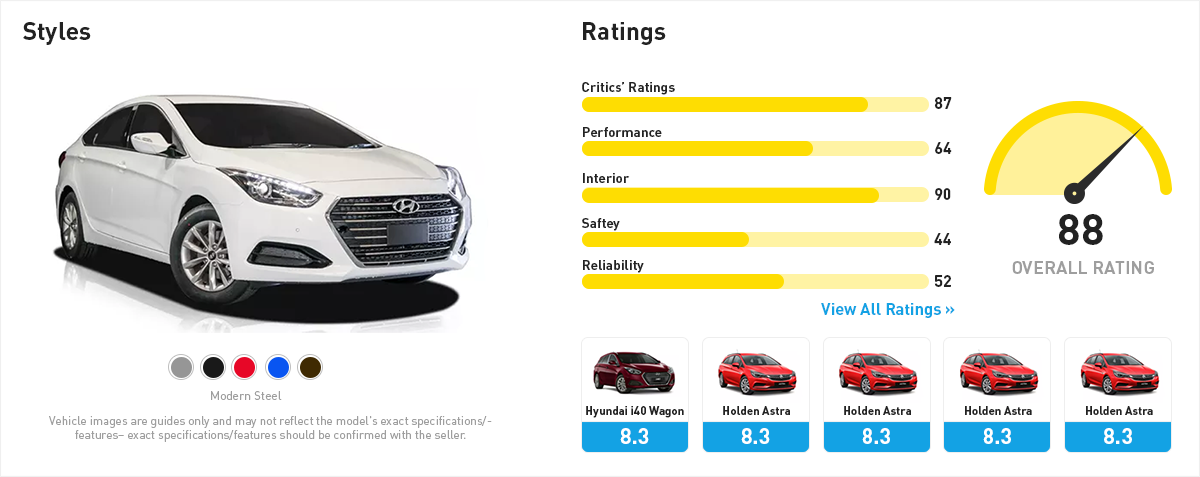
<style>
.page{position:relative;width:1200px;height:477px;background:#ffffff}
.page>*{position:absolute;margin:0}
.t1{font:24.8px "DIN-Bold";color:#222222}
.t2{font:13.6px "DIN-Bold";color:#222222}
.t3{font:16px "DIN-Bold";color:#222222}
.t4{font:16.1px "DIN-Bold";color:#222222}
.t5{font:13.7px "DIN-Bold";color:#222222}
.t6{font:43.2px "DIN-Bold";letter-spacing:0.005em;color:#222222}
.t7{font:17.9px "DIN-Bold";letter-spacing:0.005em;color:#9e9e9e}
.t8{font:16.3px "DIN-Bold";color:#13a2e4}
.t9{font:12px "DINPro-Regular";color:#9e9e9e}
.t10{font:11.6px "DIN-Bold";color:#222222}
.t11{font:11.8px "DINPro-Regular";color:#9e9e9e}
.t12{font:21.5px "DIN-Bold";color:#ffffff}
</style>
<div class="page">
<p class="t1" style="left:23px;top:22px;width:68px;height:23px">Styles</p>
<p class="t1" style="left:583px;top:22px;width:83px;height:23px">Ratings</p>
<p class="t2" style="left:582px;top:82px;width:93px;height:13px">Critics’ Ratings</p>
<p class="t3" style="left:934px;top:97px;width:18px;height:12px">87</p>
<p class="t2" style="left:583px;top:127px;width:79px;height:10px">Performance</p>
<p class="t4" style="left:935px;top:142px;width:17px;height:12px">64</p>
<p class="t5" style="left:583px;top:173px;width:47px;height:10px">Interior</p>
<p class="t4" style="left:935px;top:188px;width:16px;height:12px">90</p>
<p class="t2" style="left:582px;top:218px;width:38px;height:13px">Saftey</p>
<p class="t6" style="left:1059px;top:214px;width:44px;height:31px">88</p>
<p class="t4" style="left:934px;top:233px;width:17px;height:12px">44</p>
<p class="t5" style="left:583px;top:260px;width:61px;height:13px">Reliability</p>
<p class="t7" style="left:1012px;top:261px;width:142px;height:13px">OVERALL RATING</p>
<p class="t4" style="left:934px;top:275px;width:17px;height:12px">52</p>
<p class="t8" style="left:821px;top:303px;width:134px;height:15px">View All Ratings »</p>
<p class="t9" style="left:211px;top:391px;width:71px;height:9px">Modern Steel</p>
<p class="t10" style="left:586px;top:406px;width:98px;height:12px">Hyundai i40 Wagon</p>
<p class="t10" style="left:723px;top:406px;width:67px;height:9px">Holden Astra</p>
<p class="t10" style="left:844px;top:406px;width:67px;height:9px">Holden Astra</p>
<p class="t10" style="left:965px;top:406px;width:67px;height:9px">Holden Astra</p>
<p class="t10" style="left:1086px;top:406px;width:67px;height:9px">Holden Astra</p>
<p class="t11" style="left:49px;top:416px;width:443px;height:26px;text-align:center">Vehicle images are guides only and may not reflect the model's exact specifications/features– exact specifications/features should be confirmed with the seller.</p>
<p class="t12" style="left:620px;top:428px;width:29px;height:16px">8.3</p>
<p class="t12" style="left:741px;top:428px;width:29px;height:16px">8.3</p>
<p class="t12" style="left:862px;top:428px;width:28px;height:16px">8.3</p>
<p class="t12" style="left:983px;top:428px;width:28px;height:16px">8.3</p>
<p class="t12" style="left:1104px;top:428px;width:28px;height:16px">8.3</p>
</div>
